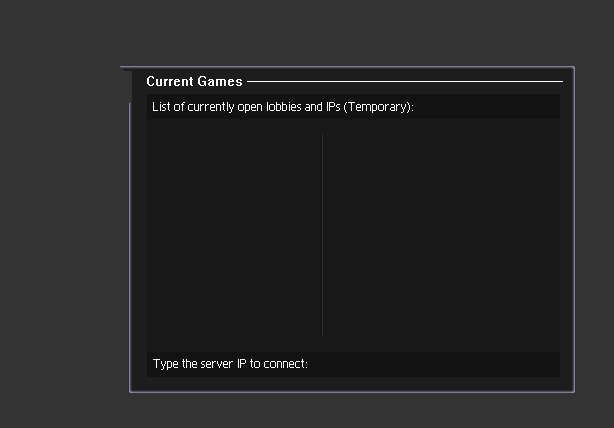
<style>
.page{position:relative;width:614px;height:428px;background:#333333}
.page>*{position:absolute;margin:0}
.t1{font:9px "System";color:#ffffff}
.t2{font:21.9px "ADMUI2Lg";color:#ffffff}
</style>
<div class="page">
<p class="t1" style="left:147px;top:76px;width:416px;height:10px">Current Games -------------------------------------------------------------------------------</p>
<p class="t2" style="left:153px;top:102px;width:260px;height:11px">List of currently open lobbies and IPs (Temporary):</p>
<p class="t2" style="left:153px;top:359px;width:154px;height:11px">Type the server IP to connect:</p>
</div>
